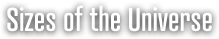
<style>
.page{position:relative;width:219px;height:39px;background:#ffffff}
.page>*{position:absolute;margin:0}
.t1{font:32px "AtramentStd-Medium";color:#ffffff}
</style>
<div class="page">
<p class="t1" style="left:7px;top:5px;width:205px;height:27px">Sizes of the Universe</p>
</div>
